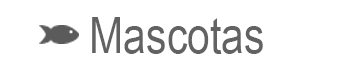
<style>
.page{position:relative;width:353px;height:72px;background:#ffffff}
.page>*{position:absolute;margin:0}
.t1{font:50px "ArialNarrow";color:#626262}
</style>
<div class="page">
<p class="t1" style="left:92px;top:17px;width:171px;height:37px">Mascotas</p>
</div>
